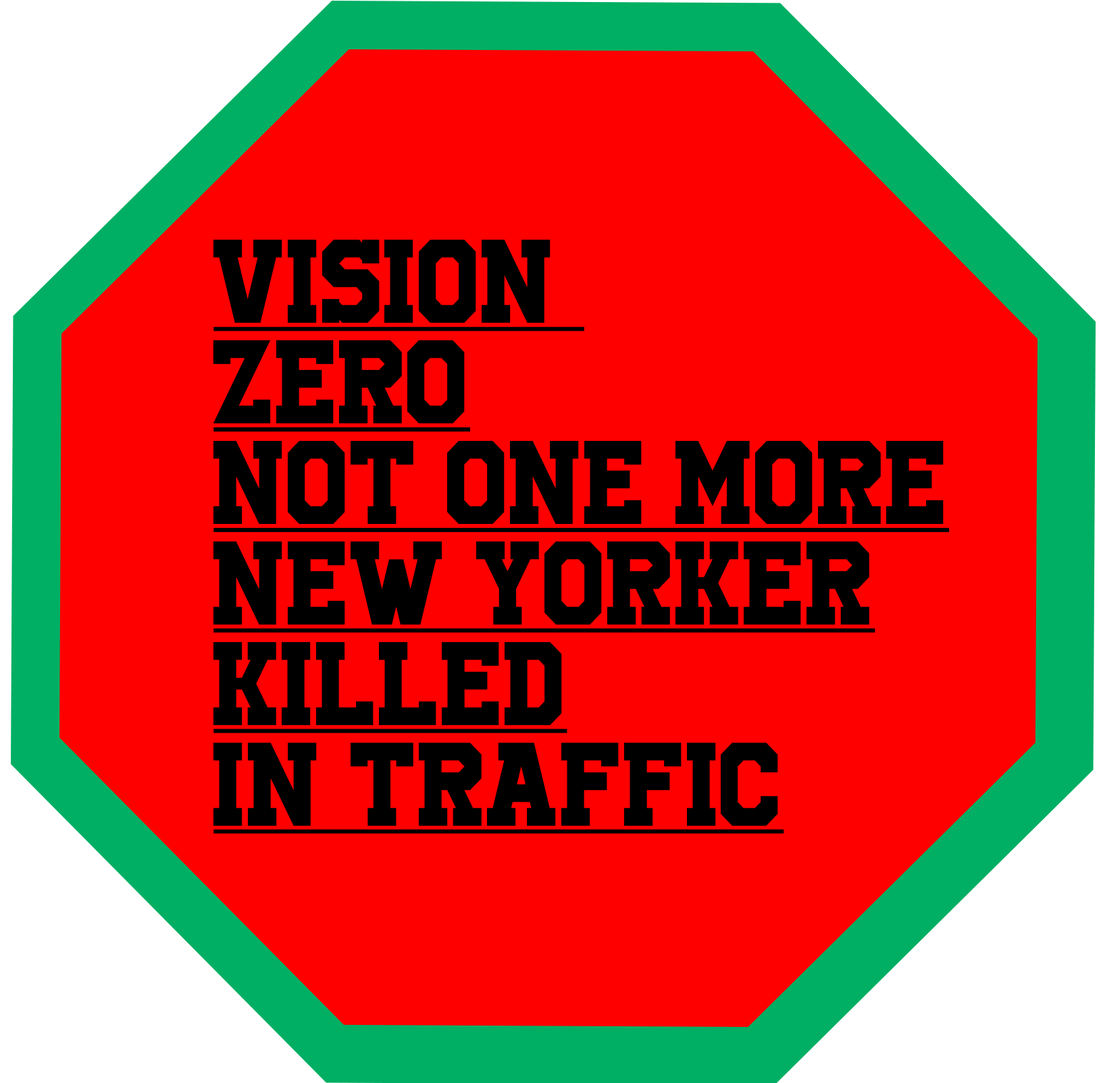
<style>
.page{position:relative;width:1101px;height:1083px;background:#ff0000}
.page>*{position:absolute;margin:0}
.t1{font:82.9px "UniversityRegular";color:#000000;text-decoration:underline;scale:0.96 1}
</style>
<div class="page">
<p class="t1" style="left:213px;top:240px;width:737px;height:594px">vision <br>zero<br>NOT ONE MORE<br>NEW YORKER<br>KILLED<br>IN TRAFFIC</p>
</div>
